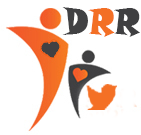
<style>
.page{position:relative;width:141px;height:135px;background:#ffffff}
.page>*{position:absolute;margin:0}
.t1{font:36.2px "SnapITC-Regular";color:#414143;scale:0.86 1}
.t2{font:36.2px "SnapITC-Regular";color:#f36f25;scale:0.86 1}
.t3{font:36.2px "SnapITC-Regular";color:#3f3f41;scale:0.86 1}
</style>
<div class="page">
<p class="t1" style="left:62px;top:7px;width:78px;height:30px">D<span class="t2">R</span><span class="t3">R</span></p>
</div>
